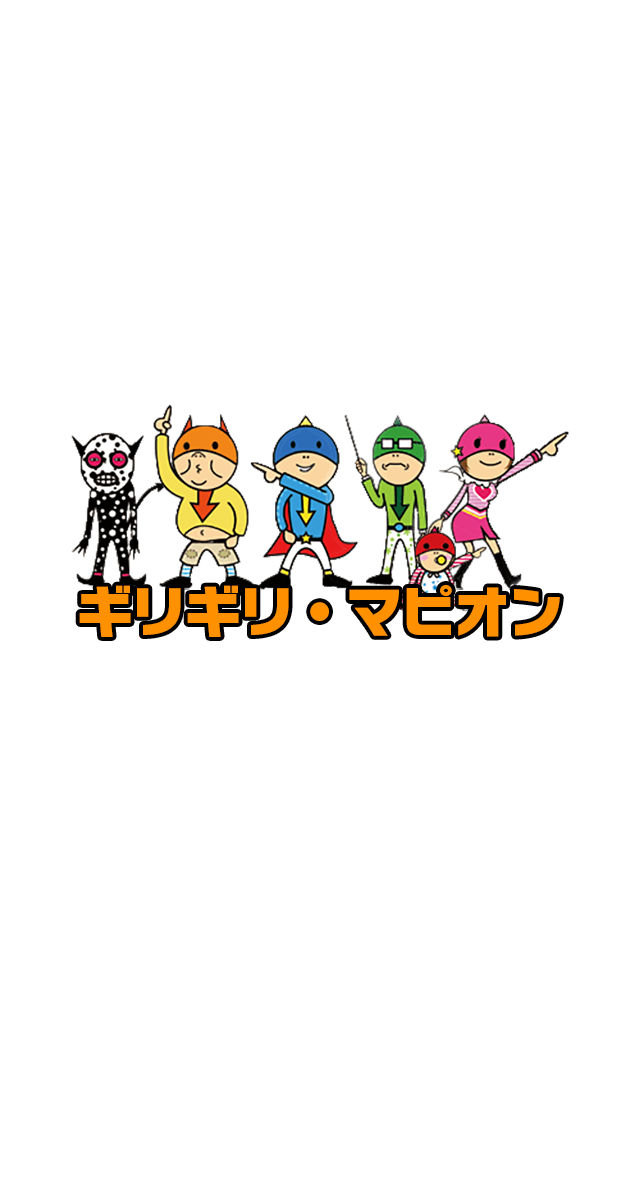
<style>
.page{position:relative;width:640px;height:1200px;background:#ffffff}
.page>*{position:absolute;margin:0}
.t1{font:53.8px "TypelaboNStd-Ultra";color:#ff9000}
</style>
<div class="page">
<p class="t1" style="left:79px;top:585px;width:481px;height:52px">ギリギリ・マピオン</p>
</div>
